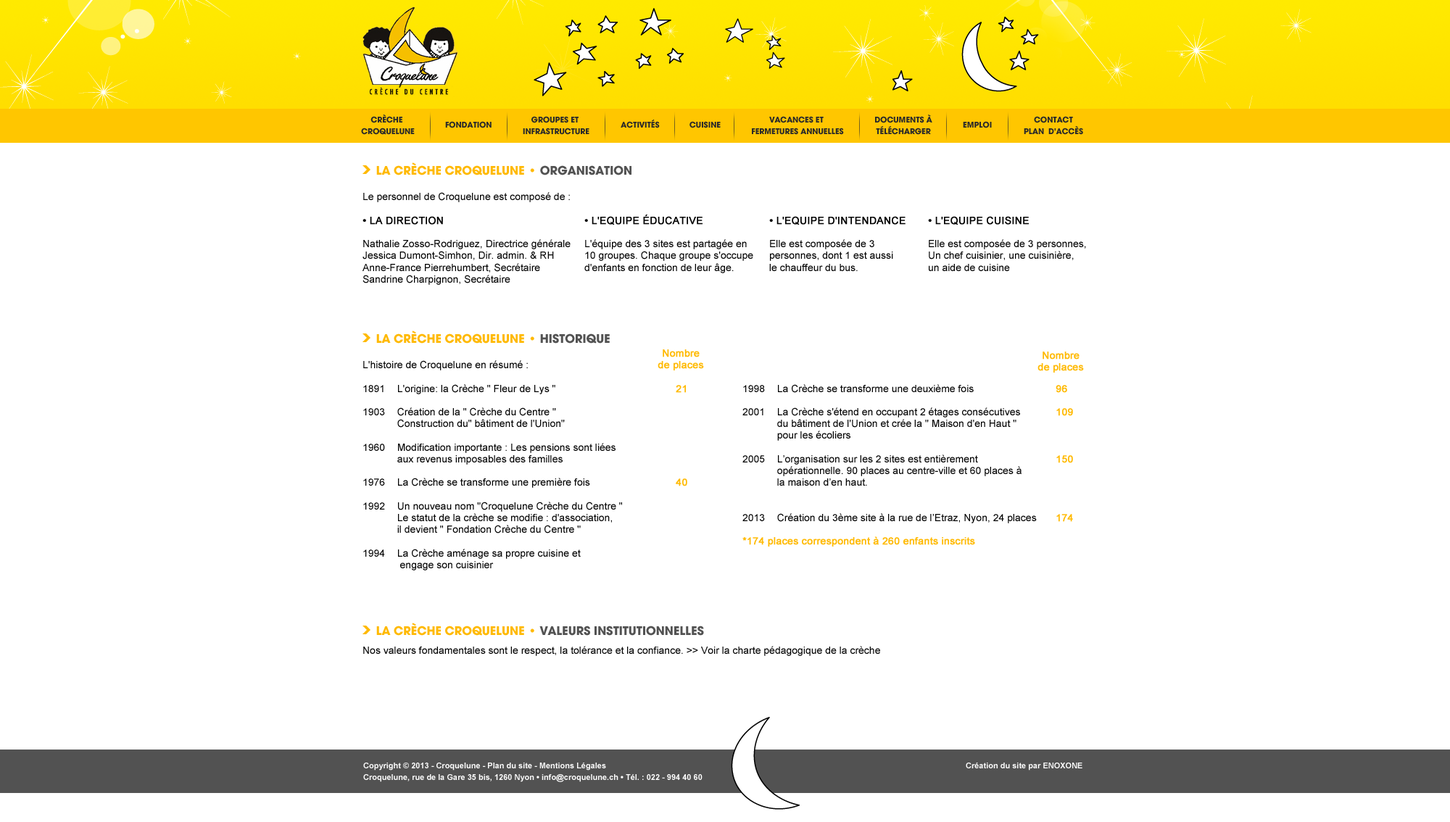
<style>
.page{position:relative;width:1450px;height:822px;background:#ffffff}
.page>*{position:absolute;margin:0}
.t1{font:8.7px/11.8px "AvantGard-Bold";color:#2a2a2a;text-transform:uppercase}
.t2{font:8.7px "AvantGard-Bold";color:#2a2a2a;text-transform:uppercase}
.t3{font:13.1px "AvantGard-Bold";color:#ffb900;text-transform:uppercase}
.t4{font:13.1px "AvantGard-Bold";color:#525252;text-transform:uppercase}
.t5{font:10.2px/11.8px "ArialMT";color:#000000}
.t6{font:10.2px/11.8px "ArialMT";color:#000000;text-transform:uppercase;font-weight:bold}
.t7{font:10.2px/11.8px "ArialMT";color:#ffb900;font-weight:bold}
.t8{font:10.2px "ArialMT";color:#000000}
.t9{font:8px/11.8px "Arial-BoldMT";color:#ffffff}
</style>
<div class="page">
<p class="t1" style="left:361px;top:114px;width:54px;height:21px;text-align:center">Crèche <br>Croquelune</p>
<p class="t2" style="left:445px;top:121px;width:47px;height:7px">Fondation</p>
<p class="t1" style="left:523px;top:116px;width:67px;height:19px;text-align:center">Groupes et <br>infrastructure</p>
<p class="t2" style="left:621px;top:119px;width:39px;height:9px">ACTIVITés</p>
<p class="t2" style="left:690px;top:121px;width:31px;height:7px">Cuisine</p>
<p class="t1" style="left:752px;top:116px;width:92px;height:19px;text-align:center">Vacances et <br>fermetures annuelles</p>
<p class="t1" style="left:875px;top:115px;width:57px;height:20px;text-align:center">DOCUMENTs à<br>télécharger</p>
<p class="t2" style="left:963px;top:121px;width:29px;height:7px">Emploi</p>
<p class="t1" style="left:1024px;top:116px;width:59px;height:19px;text-align:center">Contact<br>Plan  d'accès</p>
<p class="t3" style="left:376px;top:162px;width:256px;height:13px">la crÈche croquelune • <span class="t4">organisation</span></p>
<p class="t5" style="left:363px;top:192px;width:208px;height:93px;text-align:justify">Le personnel de Croquelune est composé de :<br><br><span class="t6">• La Direction<br><br></span>Nathalie Zosso-Rodriguez, Directrice générale<br>Jessica Dumont-Simhon, Dir. admin. &amp; RH<br>Anne-France Pierrehumbert, Secrétaire<br>Sandrine Charpignon, Secrétaire</p>
<p class="t5" style="left:584px;top:215px;width:169px;height:58px"><span class="t6">• L'Equipe éducative<br><br></span>L'équipe des 3 sites est partagée en 10 groupes. Chaque groupe s'occupe d'enfants en fonction de leur âge.</p>
<p class="t5" style="left:769px;top:216px;width:137px;height:55px;text-align:justify"><span class="t6">• L'Equipe d'intendance<br><br></span>Elle est composée de 3 <br>personnes, dont 1 est aussi <br>le chauffeur du bus.</p>
<p class="t5" style="left:928px;top:216px;width:158px;height:55px;text-align:justify"><span class="t6">• L'Equipe cuisine<br><br></span>Elle est composée de 3 personnes, <br>Un chef cuisinier, une cuisinière,<br>un aide de cuisine</p>
<p class="t3" style="left:376px;top:331px;width:234px;height:13px">la crÈche croquelune • <span class="t4">historique</span></p>
<p class="t7" style="left:658px;top:349px;width:46px;height:22px;text-align:center">Nombre<br>de places</p>
<p class="t7" style="left:1038px;top:352px;width:46px;height:21px;text-align:center">Nombre<br>de places</p>
<p class="t5" style="left:363px;top:360px;width:324px;height:211px;text-align:justify">L'histoire de Croquelune en résumé : <br><br>1891     L'origine: la Crèche " Fleur de Lys "     <span class="t7">21<br></span><br>1903     Création de la " Crèche du Centre "<br>    Construction du" bâtiment de l'Union"<br><br>1960     Modification importante : Les pensions sont liées <br>       aux revenus imposables des familles <br><br>1976     La Crèche se transforme une première fois    <span class="t7">40<br></span>    <br>1992     Un nouveau nom "Croquelune Crèche du Centre " <br>    Le statut de la crèche se modifie : d'association, <br>    il devient " Fondation Crèche du Centre " <br><br>1994     La Crèche aménage sa propre cuisine et <br>     engage son cuisinier</p>
<p class="t5" style="left:742px;top:384px;width:331px;height:163px;text-align:justify">1998     La Crèche se transforme une deuxième fois    <span class="t7">96<br><br></span>2001     La Crèche s'étend en occupant 2 étages consécutives   <span class="t7">109<br></span>    du bâtiment de l'Union et crée la " Maison d'en Haut " <br>    pour les écoliers<br><br>2005    L’organisation sur les 2 sites est entièrement     <span class="t7">150<br></span>    opérationnelle. 90 places au centre-ville et 60 places à <br>    la maison d’en haut. <br><br><br>2013    Création du 3ème site à la rue de l’Etraz, Nyon, 24 places <span class="t7">174<br><br>*174 places correspondent à 260 enfants inscrits</span></p>
<p class="t4" style="left:376px;top:623px;width:328px;height:13px"><span class="t3">la crÈche croquelune • </span>valeurs institutionnelles</p>
<p class="t8" style="left:363px;top:646px;width:517px;height:10px">Nos valeurs fondamentales sont le respect, la tolérance et la confiance. &gt;&gt; Voir la charte pédagogique de la crèche</p>
<p class="t9" style="left:363px;top:763px;width:720px;height:19px">Copyright © 2013 - Croquelune - Plan du site - Mentions Légales                                                             Création du site par ENOXONE<br>Croquelune, rue de la Gare 35 bis, 1260 Nyon • info@croquelune.ch • Tél. : 022 - 994 40 60</p>
</div>
